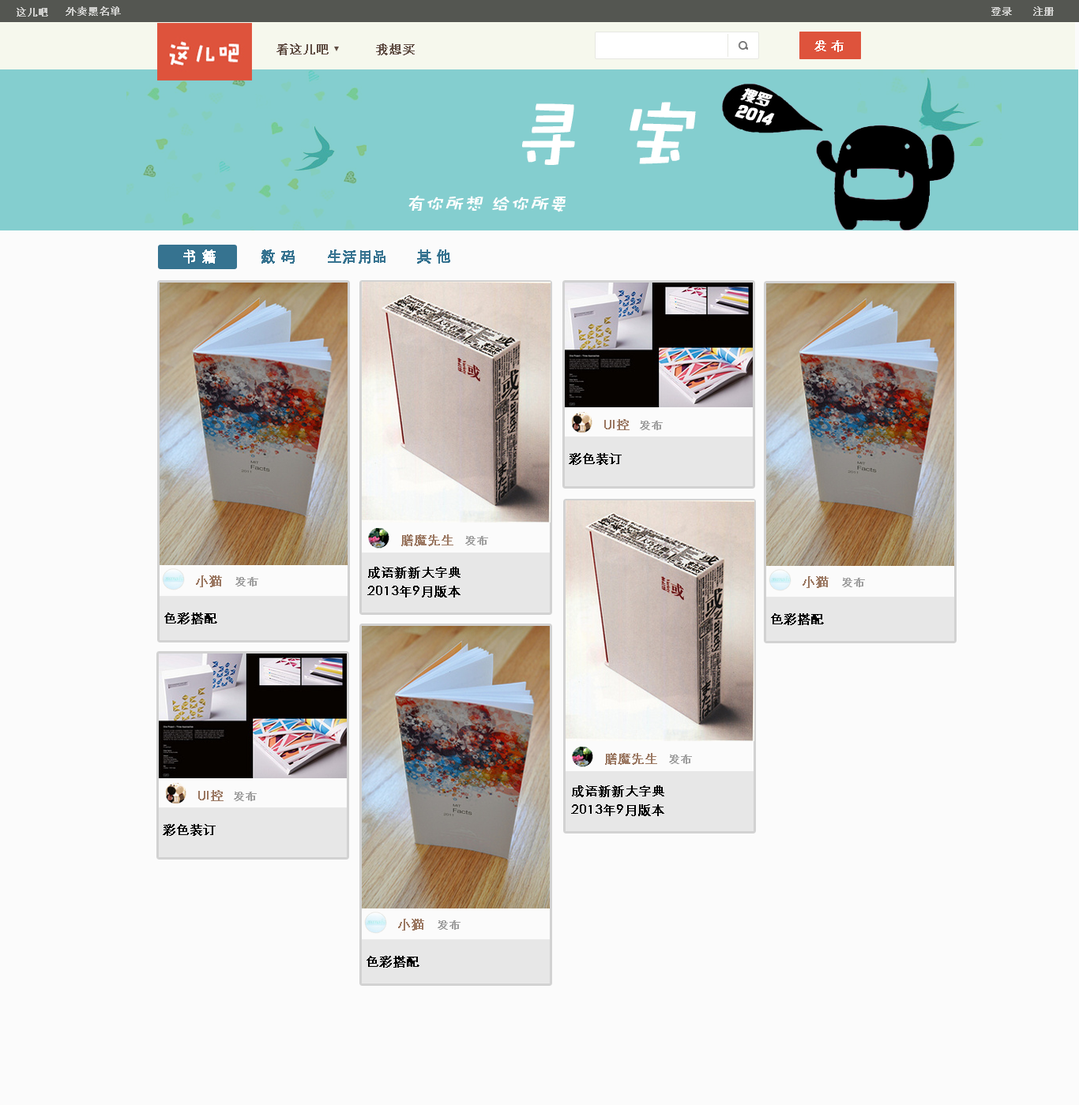
<style>
.page{position:relative;width:1079px;height:1105px;background:#fbfbfb}
.page>*{position:absolute;margin:0}
.t1{font:10.3px "STHeitiSC-Light";color:#cdcdcb;font-weight:bold}
.t2{font:12.6px "STHeitiSC-Light";color:#ffffff;font-weight:bold}
.t3{font:12.6px "STHeitiSC-Light";color:#604e44;font-weight:bold}
.t4{font:14.2px "HYk2gj";color:#ffffff;font-weight:bold;font-style:italic}
.t5{font:79px "DFWaWaSC-W5";color:#ffffff;font-weight:bold;font-style:italic}
.t6{font:19px "HYk2gj";color:#ffffff;font-weight:bold;font-style:italic}
.t7{font:19px "DFWaWaSC-W5";color:#ffffff;font-weight:bold;font-style:italic}
.t8{font:14.2px "STHeitiSC-Light";color:#ffffff;font-weight:bold}
.t9{font:14.2px "STHeitiSC-Light";color:#367390;font-weight:bold}
.t10{font:12.6px "STHeitiSC-Light";color:#9b7862;font-weight:bold}
.t11{font:11.1px "STHeitiSC-Light";color:#9f9f9f;font-weight:bold}
.t12{font:12.6px "STHeitiSC-Light";color:#000000;font-weight:bold}
.t13{font:12.6px/19px "STHeitiSC-Light";color:#000000;font-weight:bold}
</style>
<div class="page">
<p class="t1" style="left:17px;top:7px;width:31px;height:10px">这儿吧</p>
<p class="t1" style="left:66px;top:6px;width:55px;height:10px">外卖黑名单</p>
<p class="t1" style="left:991px;top:7px;width:21px;height:9px">登录</p>
<p class="t1" style="left:1033px;top:6px;width:20px;height:10px">注册</p>
<p class="t2" style="left:814px;top:40px;width:29px;height:12px">发 布</p>
<p class="t3" style="left:276px;top:43px;width:52px;height:12px">看这儿吧</p>
<p class="t3" style="left:376px;top:43px;width:39px;height:12px">我想买</p>
<p class="t4" style="left:740px;top:88px;width:33px;height:19px;rotate:17deg">搜罗</p>
<p class="t5" style="left:522px;top:102px;width:174px;height:63px">寻 宝</p>
<p class="t6" style="left:734px;top:105px;width:41px;height:21px;rotate:16deg">2014</p>
<p class="t7" style="left:408px;top:195px;width:157px;height:17px">有你所想 给你所要</p>
<p class="t8" style="left:183px;top:250px;width:33px;height:14px">书 籍</p>
<p class="t9" style="left:261px;top:250px;width:34px;height:14px">数 码</p>
<p class="t9" style="left:328px;top:250px;width:57px;height:14px">生活用品</p>
<p class="t9" style="left:417px;top:250px;width:33px;height:14px">其 他</p>
<p class="t10" style="left:604px;top:419px;width:25px;height:11px">UI控</p>
<p class="t11" style="left:640px;top:421px;width:23px;height:9px">发布</p>
<p class="t12" style="left:569px;top:453px;width:52px;height:12px">彩色装订</p>
<p class="t10" style="left:401px;top:535px;width:52px;height:11px">膳魔先生</p>
<p class="t11" style="left:465px;top:536px;width:23px;height:10px">发布</p>
<p class="t13" style="left:367px;top:567px;width:93px;height:31px">成语新新大字典<br>2013年9月版本</p>
<p class="t10" style="left:196px;top:576px;width:26px;height:11px">小猫</p>
<p class="t11" style="left:235px;top:577px;width:23px;height:10px">发布</p>
<p class="t10" style="left:802px;top:576px;width:26px;height:12px">小猫</p>
<p class="t11" style="left:842px;top:578px;width:23px;height:9px">发布</p>
<p class="t12" style="left:164px;top:613px;width:53px;height:12px">色彩搭配</p>
<p class="t12" style="left:771px;top:614px;width:53px;height:11px">色彩搭配</p>
<p class="t10" style="left:605px;top:753px;width:52px;height:12px">膳魔先生</p>
<p class="t11" style="left:669px;top:755px;width:23px;height:9px">发布</p>
<p class="t13" style="left:571px;top:786px;width:93px;height:30px">成语新新大字典<br>2013年9月版本</p>
<p class="t10" style="left:198px;top:790px;width:25px;height:11px">UI控</p>
<p class="t11" style="left:234px;top:792px;width:23px;height:9px">发布</p>
<p class="t12" style="left:163px;top:824px;width:53px;height:12px">彩色装订</p>
<p class="t10" style="left:398px;top:919px;width:26px;height:12px">小猫</p>
<p class="t11" style="left:437px;top:921px;width:23px;height:9px">发布</p>
<p class="t12" style="left:366px;top:956px;width:53px;height:12px">色彩搭配</p>
</div>
